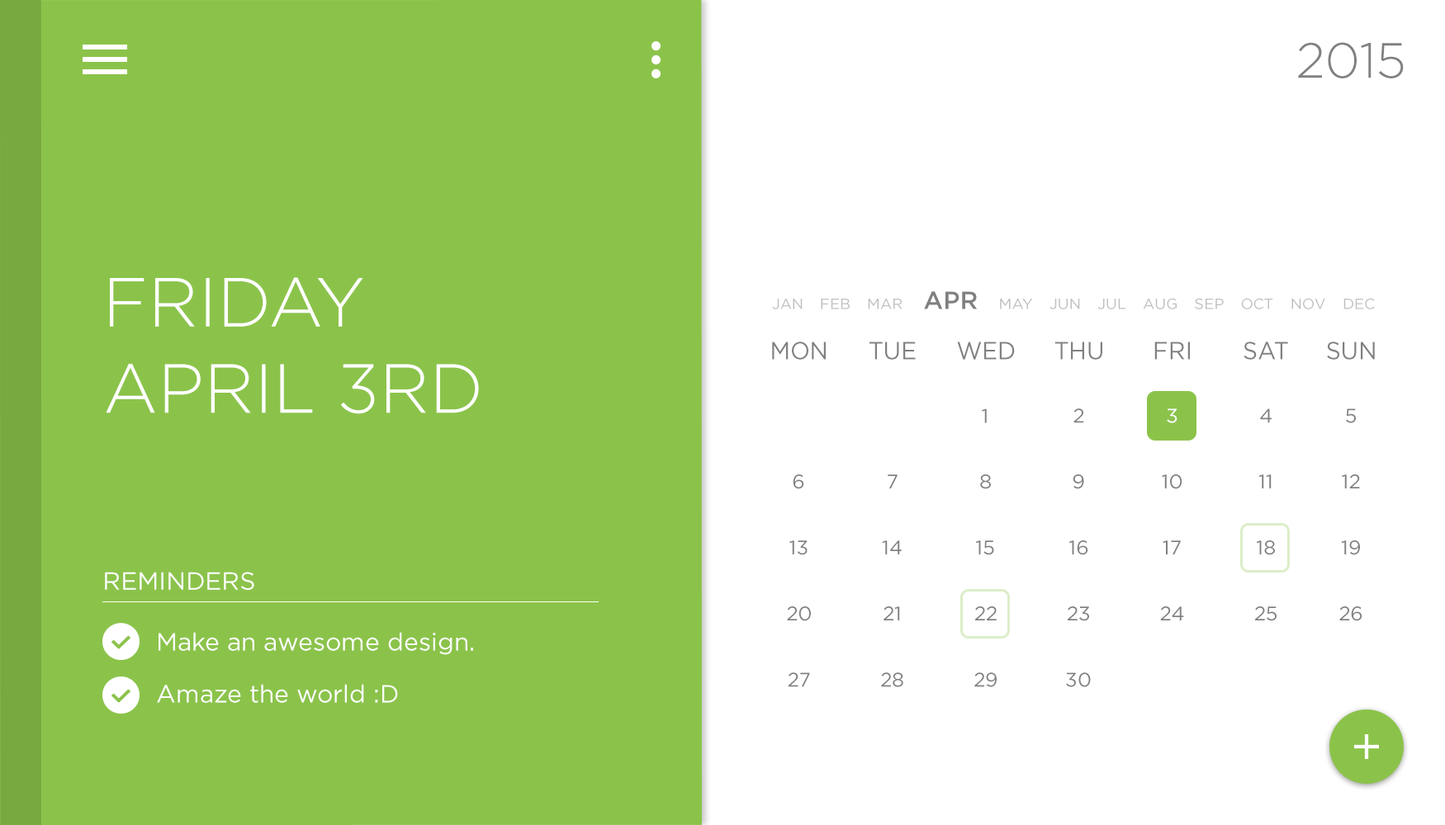
<style>
.page{position:relative;width:1445px;height:825px;background:#ffffff}
.page>*{position:absolute;margin:0}
.t1{font:49.5px "Gotham-Light";color:#808080}
.t2{font:69.3px "Gotham-Light";color:#ffffff}
.t3{font:14.9px "Gotham-Book";color:#bfbfbf}
.t4{font:24.8px "Gotham-Medium";color:#808080}
.t5{font:24.8px "Gotham-Book";color:#808080;scale:0.94 1}
.t6{font:19.8px "Gotham-Book";color:#808080}
.t7{font:19.8px "Gotham-Book";color:#ffffff}
.t8{font:24.7px "Gotham-Book";color:#ffffff}
</style>
<div class="page">
<p class="t1" style="left:1298px;top:42px;width:105px;height:36px">2015</p>
<p class="t2" style="left:110px;top:277px;width:253px;height:50px">FRIDAY</p>
<p class="t3" style="left:772px;top:291px;width:602px;height:19px">JAN    FEB    MAR     <span class="t4">APR</span>     MAY    JUN    JUL    AUG    SEP    OCT    NOV    DEC</p>
<p class="t5" style="left:772px;top:342px;width:53px;height:18px">MON</p>
<p class="t5" style="left:869px;top:342px;width:46px;height:18px">TUE</p>
<p class="t5" style="left:957px;top:342px;width:57px;height:18px">WED</p>
<p class="t5" style="left:1054px;top:342px;width:48px;height:18px">THU</p>
<p class="t5" style="left:1154px;top:342px;width:35px;height:18px">FRI</p>
<p class="t5" style="left:1243px;top:342px;width:45px;height:18px">SAT</p>
<p class="t5" style="left:1327px;top:342px;width:47px;height:18px">SUN</p>
<p class="t2" style="left:106px;top:364px;width:373px;height:50px">APRIL 3RD</p>
<p class="t6" style="left:981px;top:409px;width:5px;height:14px">1</p>
<p class="t6" style="left:1073px;top:409px;width:11px;height:14px">2</p>
<p class="t7" style="left:1166px;top:409px;width:11px;height:14px">3</p>
<p class="t6" style="left:1260px;top:409px;width:11px;height:14px">4</p>
<p class="t6" style="left:1346px;top:409px;width:9px;height:14px">5</p>
<p class="t6" style="left:792px;top:475px;width:12px;height:14px">6</p>
<p class="t6" style="left:887px;top:475px;width:10px;height:14px">7</p>
<p class="t6" style="left:980px;top:475px;width:11px;height:14px">8</p>
<p class="t6" style="left:1072px;top:475px;width:12px;height:14px">9</p>
<p class="t6" style="left:1161px;top:475px;width:21px;height:14px">10</p>
<p class="t6" style="left:1258px;top:475px;width:13px;height:14px">11</p>
<p class="t6" style="left:1341px;top:475px;width:19px;height:14px">12</p>
<p class="t6" style="left:789px;top:541px;width:18px;height:15px">13</p>
<p class="t6" style="left:882px;top:541px;width:19px;height:14px">14</p>
<p class="t6" style="left:976px;top:541px;width:18px;height:15px">15</p>
<p class="t6" style="left:1069px;top:541px;width:19px;height:15px">16</p>
<p class="t6" style="left:1162px;top:541px;width:18px;height:14px">17</p>
<p class="t6" style="left:1256px;top:541px;width:19px;height:15px">18</p>
<p class="t6" style="left:1341px;top:541px;width:19px;height:15px">19</p>
<p class="t8" style="left:105px;top:572px;width:149px;height:18px">REMINDERS</p>
<p class="t6" style="left:787px;top:607px;width:24px;height:15px">20</p>
<p class="t6" style="left:883px;top:607px;width:17px;height:14px">21</p>
<p class="t6" style="left:975px;top:607px;width:21px;height:14px">22</p>
<p class="t6" style="left:1067px;top:607px;width:22px;height:15px">23</p>
<p class="t6" style="left:1160px;top:607px;width:24px;height:14px">24</p>
<p class="t6" style="left:1255px;top:607px;width:21px;height:15px">25</p>
<p class="t6" style="left:1339px;top:607px;width:23px;height:15px">26</p>
<p class="t8" style="left:158px;top:632px;width:315px;height:23px">Make an awesome design.</p>
<p class="t6" style="left:787px;top:673px;width:23px;height:15px">27</p>
<p class="t6" style="left:881px;top:673px;width:22px;height:15px">28</p>
<p class="t6" style="left:974px;top:673px;width:22px;height:15px">29</p>
<p class="t6" style="left:1066px;top:673px;width:24px;height:15px">30</p>
<p class="t8" style="left:157px;top:684px;width:241px;height:19px">Amaze the world :D</p>
</div>
